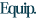
<style>
.page{position:relative;width:36px;height:18px;background:#ffffff}
.page>*{position:absolute;margin:0}
.t1{font:16px "HeiseiMinStd-W7";letter-spacing:-0.09em;color:#073c4d}
</style>
<div class="page">
<p class="t1" style="left:0px;top:2px;width:36px;height:16px">Equip.</p>
</div>
